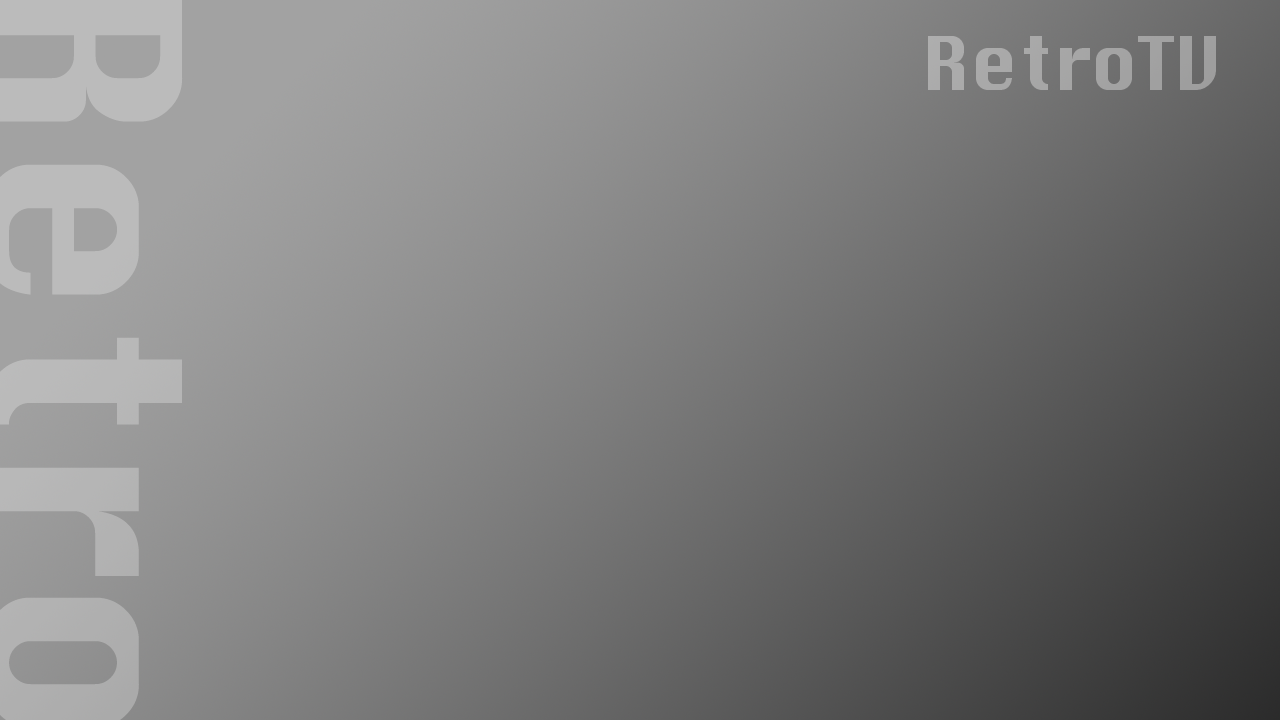
<style>
.page{position:relative;width:1280px;height:720px}
.page>*{position:absolute;margin:0}
.t1{font:72px "Krungthep";color:#a6a6a6}
</style>
<div class="page">
<p class="t1" style="left:928px;top:36px;width:288px;height:54px">RetroTV</p>
</div>
